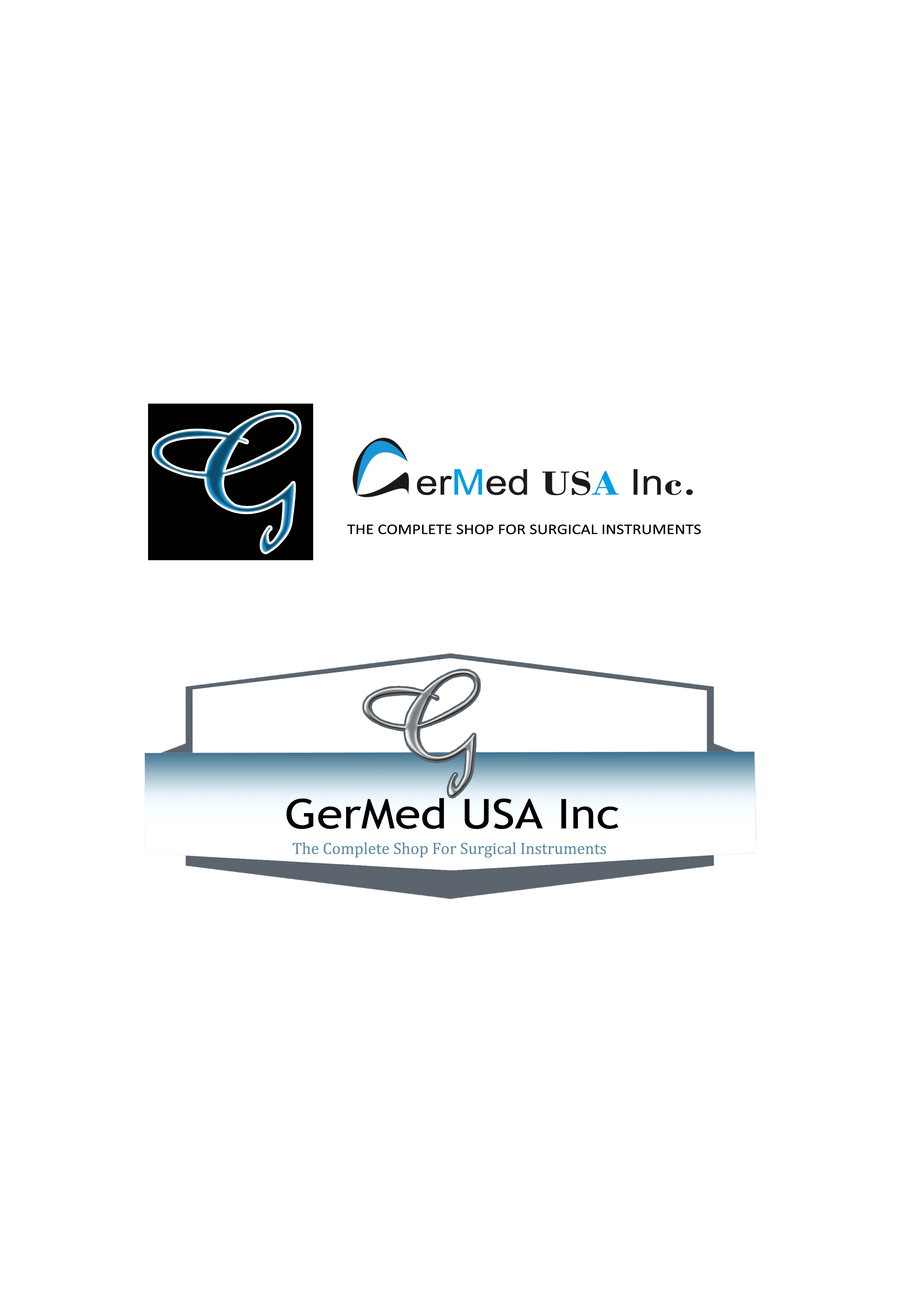
<style>
.page{position:relative;width:918px;height:1299px;background:#ffffff}
.page>*{position:absolute;margin:0}
.t1{font:14.8px "Calibri";color:#000000;scale:1.14 1}
.t2{font:41px "TrebuchetMS";color:#000000;scale:1.16 1}
.t3{font:16.5px "Cambria";color:#628ea5}
</style>
<div class="page">
<p class="t1" style="left:347px;top:524px;width:354px;height:10px">THE COMPLETE SHOP FOR SURGICAL INSTRUMENTS</p>
<p class="t2" style="left:287px;top:798px;width:332px;height:31px">GerMed USA Inc</p>
<p class="t3" style="left:292px;top:842px;width:314px;height:15px">The Complete Shop For Surgical Instruments</p>
</div>
